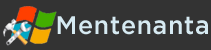
<style>
.page{position:relative;width:211px;height:50px;background:#333333}
.page>*{position:absolute;margin:0}
.t1{font:25.5px "GothamMedium";letter-spacing:0.025em;color:#d6eaf2}
</style>
<div class="page">
<p class="t1" style="left:57px;top:16px;width:151px;height:19px">Mentenanta</p>
</div>
